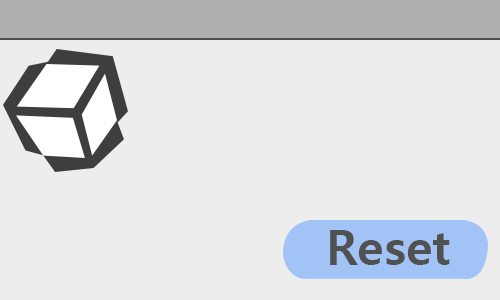
<style>
.page{position:relative;width:500px;height:300px;background:#ededed}
.page>*{position:absolute;margin:0}
.t1{font:48px "MalgunGothicBold";color:#515151}
</style>
<div class="page">
<p class="t1" style="left:330px;top:230px;width:120px;height:35px">Reset</p>
</div>
